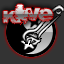
<style>
.page{position:relative;width:64px;height:64px;background:#333333}
.page>*{position:absolute;margin:0}
.t1{font:16px "Abite"}
</style>
<div class="page">
<p class="t1" style="left:2px;top:4px;width:51px;height:21px">KWE</p>
</div>
